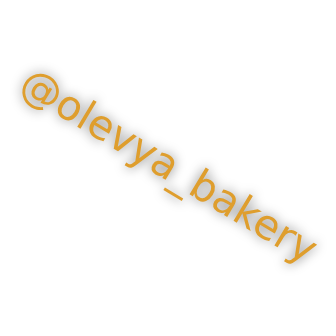
<style>
.page{position:relative;width:336px;height:336px;background:#ffffff}
.page>*{position:absolute;margin:0}
.t1{font:41.1px "DejaVuSans";color:#df9e2d}
</style>
<div class="page">
<p class="t1" style="left:22px;top:73px;width:295px;height:191px;rotate:31deg">@olevya_bakery</p>
</div>
